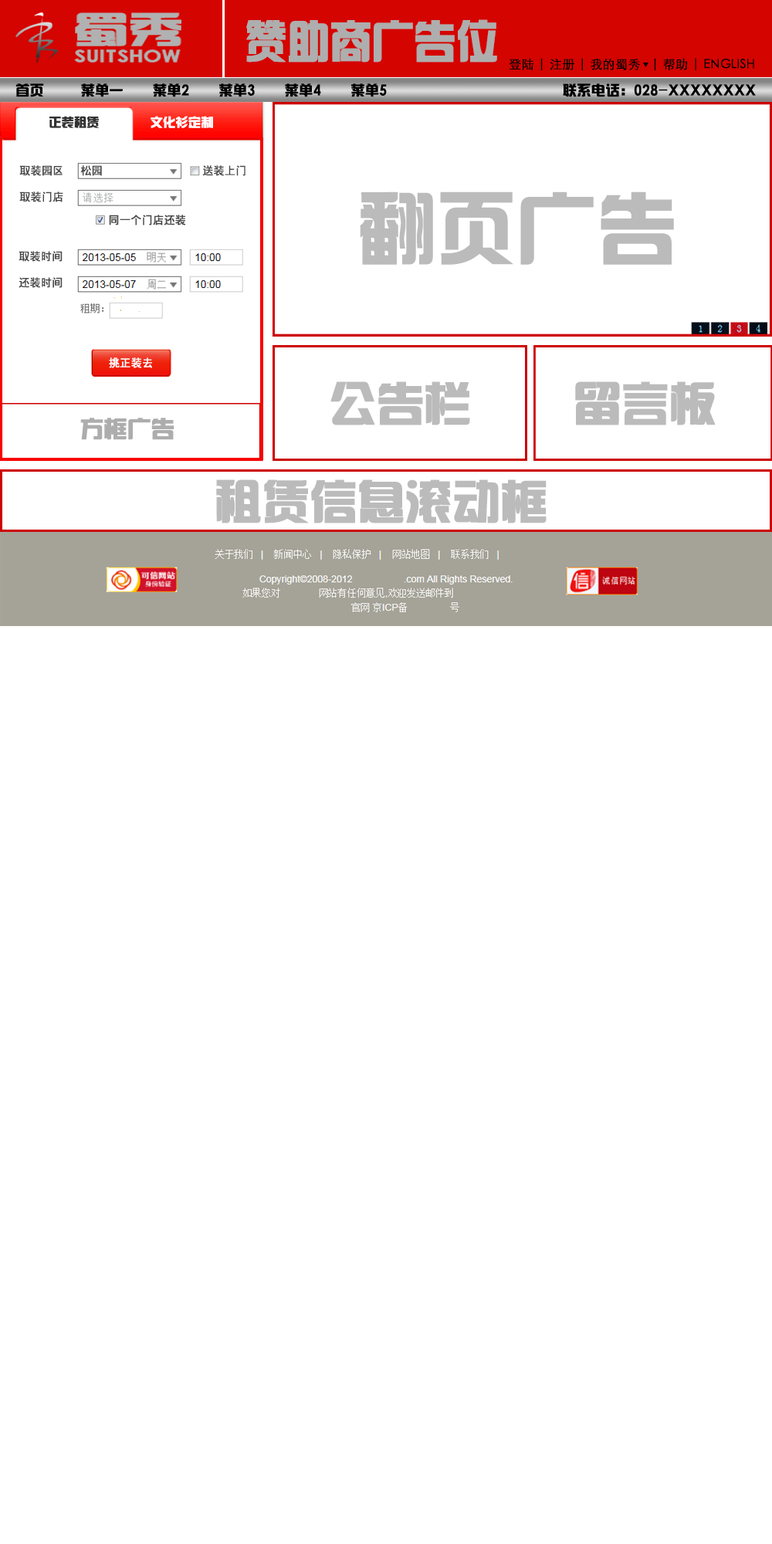
<style>
.page{position:relative;width:772px;height:1544px;background:#ffffff}
.page>*{position:absolute;margin:0}
.t1{font:44.8px "¹ã½Ý¾ÓÃÔÄã×Ö¿â";color:#aeaeae;text-transform:uppercase;font-weight:bold;scale:0.92 1}
.t2{font:12.6px "STXihei";color:#000000;text-transform:uppercase;font-weight:bold}
.t3{font:13.9px "¹ã½Ý¾ÓÃÔÄã×Ö¿â";color:#000000;text-transform:uppercase;font-weight:bold}
.t4{font:12.4px "¹ã½Ý¾ÓÃÔÄã×Ö¿â";color:#323232;text-transform:uppercase;font-weight:bold}
.t5{font:12.4px "¹ã½Ý¾ÓÃÔÄã×Ö¿â";color:#ffffff;text-transform:uppercase;font-weight:bold}
.t6{font:10.8px/13.1px "JPinHei";color:#494949;text-transform:uppercase;font-weight:bold}
.t7{font:10.8px "JPinHei";color:#494949;text-transform:uppercase;font-weight:bold}
.t8{font:78.1px "¹ã½Ý¾ÓÃÔÄã×Ö¿â";color:#bbbbbb;text-transform:uppercase;font-weight:bold}
.t9{font:10.8px "JPinHei";color:#ffffff;text-transform:uppercase;font-weight:bold}
.t10{font:46.3px "¹ã½Ý¾ÓÃÔÄã×Ö¿â";color:#bbbbbb;text-transform:uppercase;font-weight:bold}
.t11{font:23.2px "¹ã½Ý¾ÓÃÔÄã×Ö¿â";color:#adadad;text-transform:uppercase;font-weight:bold}
</style>
<div class="page">
<p class="t1" style="left:246px;top:19px;width:251px;height:44px">赞助商广告位</p>
<p class="t2" style="left:509px;top:58px;width:245px;height:12px">登陆 | 注册 | 我的蜀秀   | 帮助 | English</p>
<p class="t3" style="left:15px;top:83px;width:741px;height:14px">首页     菜单一    菜单2    菜单3    菜单4    菜单5                        联系电话：028-xxxxxxxx</p>
<p class="t4" style="left:49px;top:116px;width:50px;height:12px">正装租赁</p>
<p class="t5" style="left:151px;top:116px;width:62px;height:12px">文化衫定制</p>
<p class="t6" style="left:19px;top:165px;width:44px;height:37px;text-align:right">取装园区<br><br>取装门店</p>
<p class="t7" style="left:80px;top:165px;width:22px;height:11px">松园</p>
<p class="t7" style="left:202px;top:165px;width:44px;height:11px">送装上门</p>
<p class="t8" style="left:360px;top:191px;width:314px;height:74px">翻页广告</p>
<p class="t6" style="left:19px;top:251px;width:44px;height:37px;text-align:right">取装时间<br><br>还装时间</p>
<p class="t9" style="left:109px;top:358px;width:43px;height:10px">挑正装去</p>
<p class="t10" style="left:330px;top:381px;width:140px;height:44px">公告栏</p>
<p class="t10" style="left:575px;top:381px;width:141px;height:44px">留言板</p>
<p class="t11" style="left:80px;top:418px;width:95px;height:22px">方框广告</p>
<p class="t10" style="left:216px;top:480px;width:331px;height:44px">租赁信息滚动框</p>
</div>
